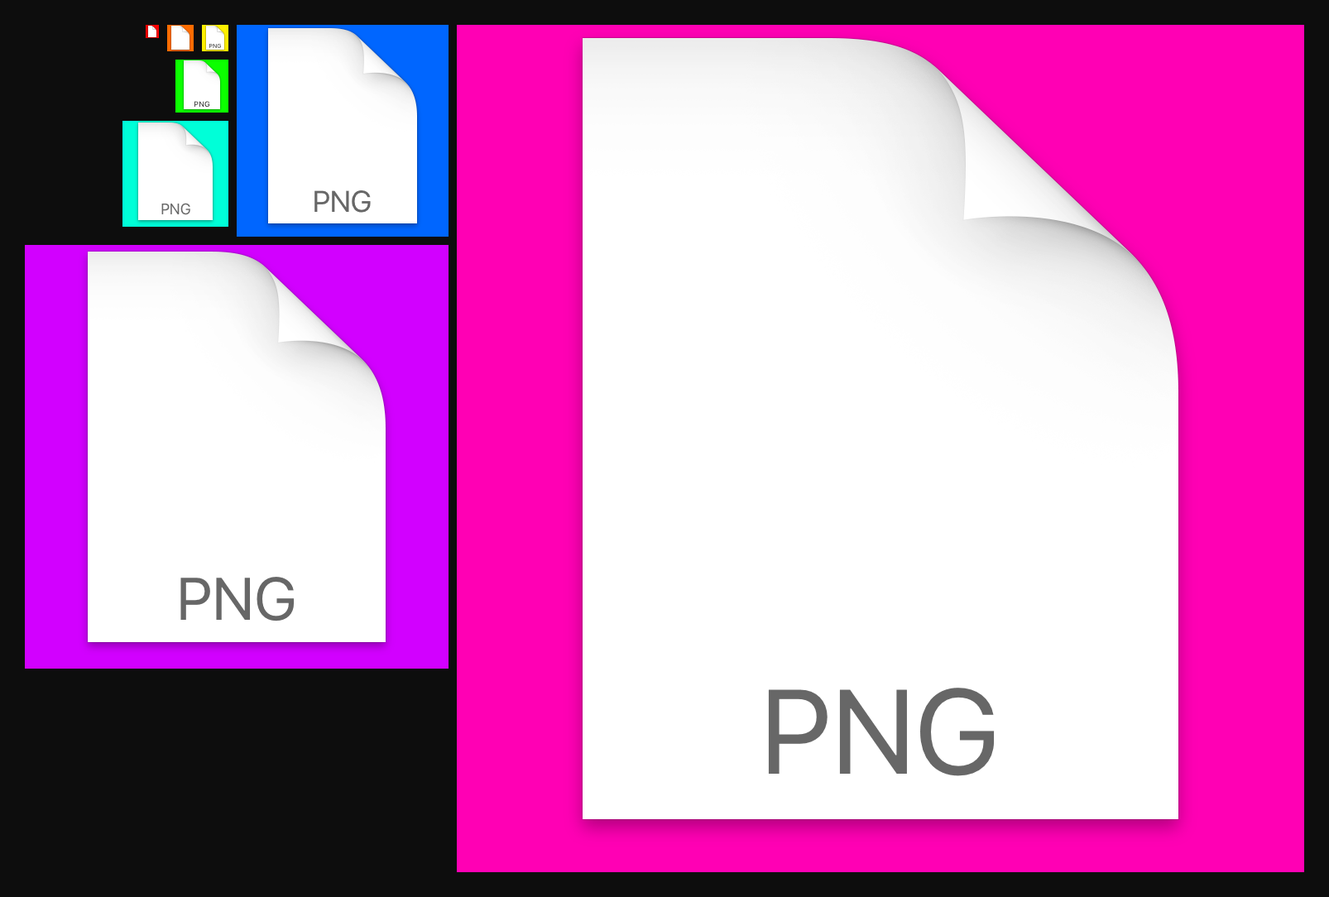
<style>
.page{position:relative;width:1329px;height:897px;background:#ffffff}
.page>*{position:absolute;margin:0}
.t1{font:5.8px "SFUIText-Regular";letter-spacing:0.02em}
.t2{font:7.4px "SFUIText-Regular";letter-spacing:0.02em}
.t3{font:29.8px "SFUIText-Regular";letter-spacing:-0.04em;color:#676767}
.t4{font:14.9px "SFUIText-Regular";letter-spacing:-0.04em;color:#676767}
.t5{font:59.6px "SFUIText-Regular";letter-spacing:-0.04em;color:#676767}
.t6{font:119.2px "SFUIText-Regular";letter-spacing:-0.04em;color:#676767}
</style>
<div class="page">
<p class="t1" style="left:209px;top:44px;width:12px;height:4px">PNG</p>
<p class="t2" style="left:194px;top:101px;width:16px;height:7px">PNG</p>
<p class="t3" style="left:314px;top:190px;width:57px;height:23px">PNG</p>
<p class="t4" style="left:161px;top:203px;width:29px;height:12px">PNG</p>
<p class="t5" style="left:180px;top:577px;width:115px;height:45px">PNG</p>
<p class="t6" style="left:768px;top:688px;width:227px;height:88px">PNG</p>
</div>
